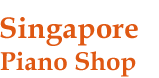
<style>
.page{position:relative;width:159px;height:78px;background:#ffffff}
.page>*{position:absolute;margin:0}
.t1{font:30px "BookAntiqua-Bold";color:#df5813}
.t2{font:26px "BookAntiqua-Bold";color:#df5813}
</style>
<div class="page">
<p class="t1" style="left:0px;top:17px;width:138px;height:29px">Singapore</p>
<p class="t2" style="left:0px;top:51px;width:136px;height:26px">Piano Shop</p>
</div>
